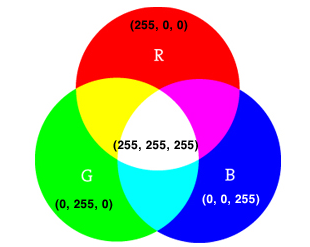
<style>
.page{position:relative;width:310px;height:247px;background:#ffffff}
.page>*{position:absolute;margin:0}
.t1{font:12px "Helvetica-Bold";letter-spacing:0.025em;color:#000000}
.t2{font:12px "Helvetica-Bold";letter-spacing:0.025em;color:#ffffff}
</style>
<div class="page">
<p class="t1" style="left:130px;top:20px;width:58px;height:12px">(255, 0, 0)</p>
<p class="t1" style="left:113px;top:140px;width:85px;height:12px">(255, 255, 255)</p>
<p class="t2" style="left:202px;top:194px;width:58px;height:12px">(0, 0, 255)</p>
<p class="t1" style="left:55px;top:199px;width:58px;height:12px">(0, 255, 0)</p>
</div>
